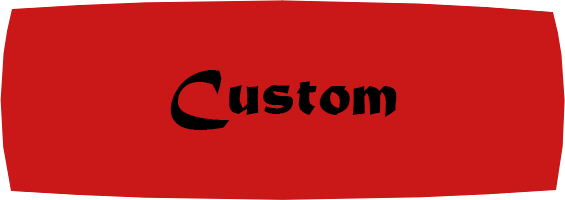
<style>
.page{position:relative;width:565px;height:200px;background:#ca1717}
.page>*{position:absolute;margin:0}
.t1{font:66.7px "MaturaMTScriptCapitals";color:#000000}
</style>
<div class="page">
<p class="t1" style="left:170px;top:70px;width:227px;height:60px">Custom</p>
</div>
